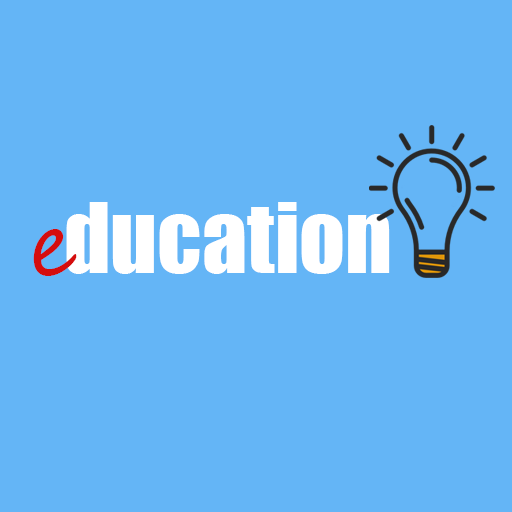
<style>
.page{position:relative;width:512px;height:512px;background:#64b5f6}
.page>*{position:absolute;margin:0}
.t1{font:90px "Impact";color:#ffffff}
.t2{font:90px "SegoeScript";color:#d50d0d}
</style>
<div class="page">
<p class="t1" style="left:66px;top:202px;width:324px;height:72px">ducation</p>
<p class="t2" style="left:33px;top:229px;width:44px;height:47px">e</p>
</div>
